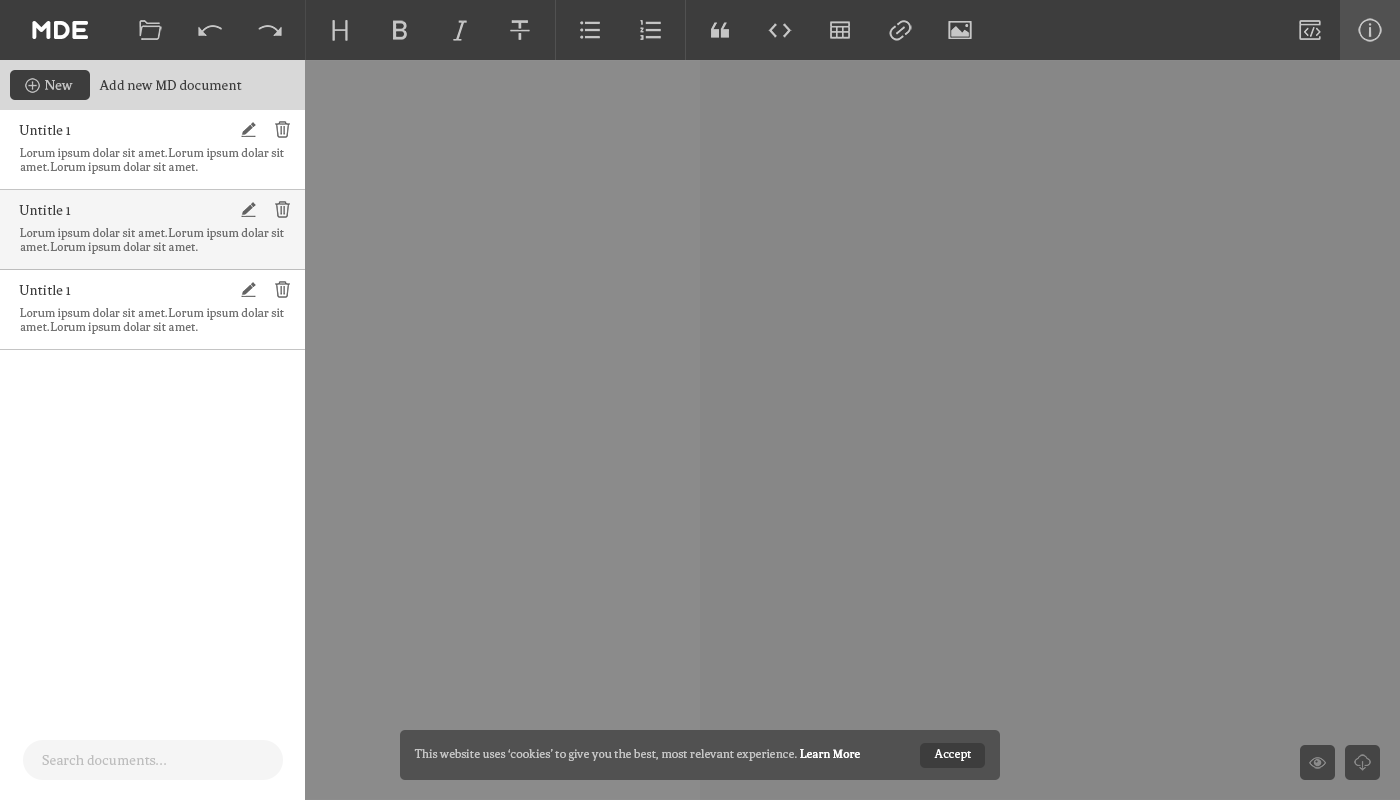
<style>
.page{position:relative;width:1400px;height:800px;background:#878787}
.page>*{position:absolute;margin:0}
.t1{font:24px "Aqum";color:#ffffff}
.t2{font:14px "Brela";color:#c6c6c6}
.t3{font:14px "Brela";color:#3d3d3d}
.t4{font:12px/14px "Brela";color:#737373}
.t5{font:12px/14px "Brela";color:#707070}
.t6{font:12px "Brela";color:#c5c5c5}
.t7{font:12px "Brela";color:#ffffff}
.t8{font:14px "Brela";color:#bdbdbd}
</style>
<div class="page">
<p class="t1" style="left:32px;top:21px;width:56px;height:18px">mde</p>
<p class="t2" style="left:45px;top:80px;width:28px;height:10px">New</p>
<p class="t3" style="left:99px;top:80px;width:143px;height:10px">Add new MD document</p>
<p class="t3" style="left:19px;top:125px;width:52px;height:10px">Untitle 1</p>
<p class="t4" style="left:20px;top:148px;width:264px;height:26px">Lorum ipsum dolar sit amet.Lorum ipsum dolar sit amet.Lorum ipsum dolar sit amet.</p>
<p class="t3" style="left:19px;top:205px;width:52px;height:10px">Untitle 1</p>
<p class="t5" style="left:20px;top:228px;width:264px;height:26px">Lorum ipsum dolar sit amet.Lorum ipsum dolar sit amet.Lorum ipsum dolar sit amet.</p>
<p class="t3" style="left:19px;top:285px;width:52px;height:10px">Untitle 1</p>
<p class="t4" style="left:20px;top:308px;width:264px;height:26px">Lorum ipsum dolar sit amet.Lorum ipsum dolar sit amet.Lorum ipsum dolar sit amet.</p>
<p class="t6" style="left:414px;top:749px;width:446px;height:12px">This website uses ‘cookies’ to give you the best, most relevant experience. Learn More</p>
<p class="t7" style="left:800px;top:749px;width:60px;height:9px">Learn More</p>
<p class="t7" style="left:934px;top:749px;width:37px;height:12px">Accept</p>
<p class="t8" style="left:42px;top:755px;width:124px;height:10px">Search documents...</p>
</div>
